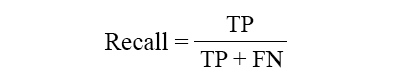
<style>
.page{position:relative;width:400px;height:80px;background:#ffffff}
.page>*{position:absolute;margin:0}
.t1{font:24px "TimesNewRomanPSMT";color:#000000}
.t2{font:25px "TimesNewRomanPSMT";color:#000000}
</style>
<div class="page">
<p class="t1" style="left:226px;top:16px;width:28px;height:16px">TP</p>
<p class="t2" style="left:104px;top:32px;width:85px;height:18px">Recall =</p>
<p class="t1" style="left:200px;top:51px;width:84px;height:17px">TP + FN</p>
</div>
